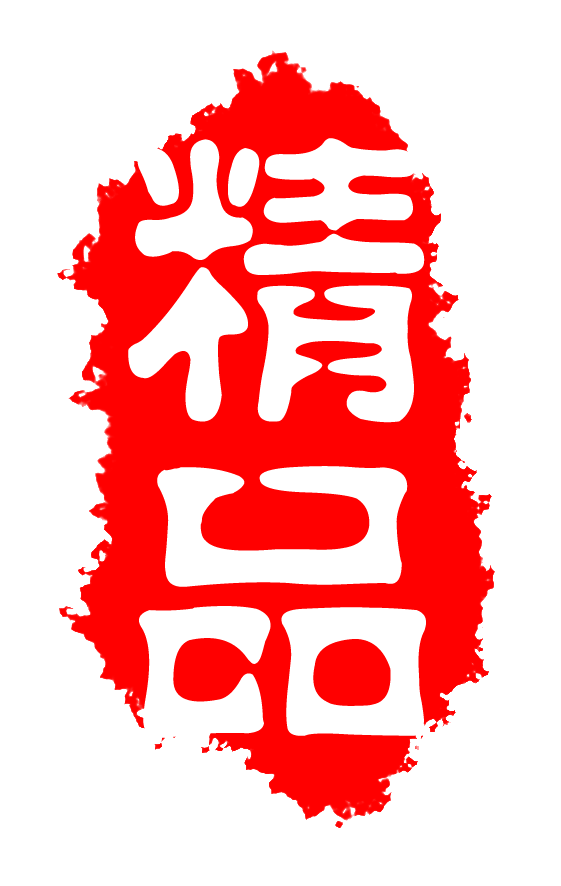
<style>
.page{position:relative;width:561px;height:886px;background:#ffffff}
.page>*{position:absolute;margin:0}
.t1{font:317.9px/318.5px "FZSZJW--GB1-0";letter-spacing:0.05em;color:#ffffff}
</style>
<div class="page">
<p class="t1" style="left:128px;top:138px;width:298px;height:601px">精<br>品</p>
</div>
